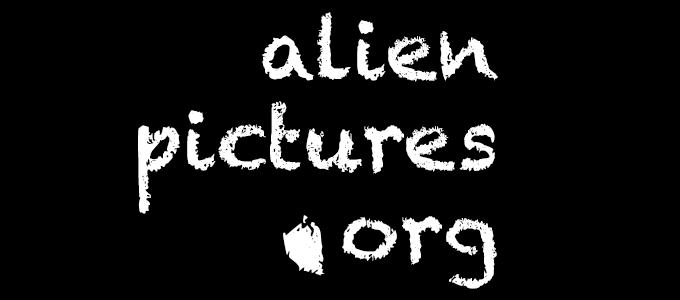
<style>
.page{position:relative;width:680px;height:300px;background:#000000}
.page>*{position:absolute;margin:0}
.t1{font:82.8px/90.3px "Chalkduster";color:#ffffff}
.t2{font:225.8px/90.3px "Chalkduster";color:#ffffff}
</style>
<div class="page">
<p class="t1" style="left:138px;top:12px;width:360px;height:277px;text-align:right">alien<br>pictures<br><span class="t2">.</span>org</p>
</div>
